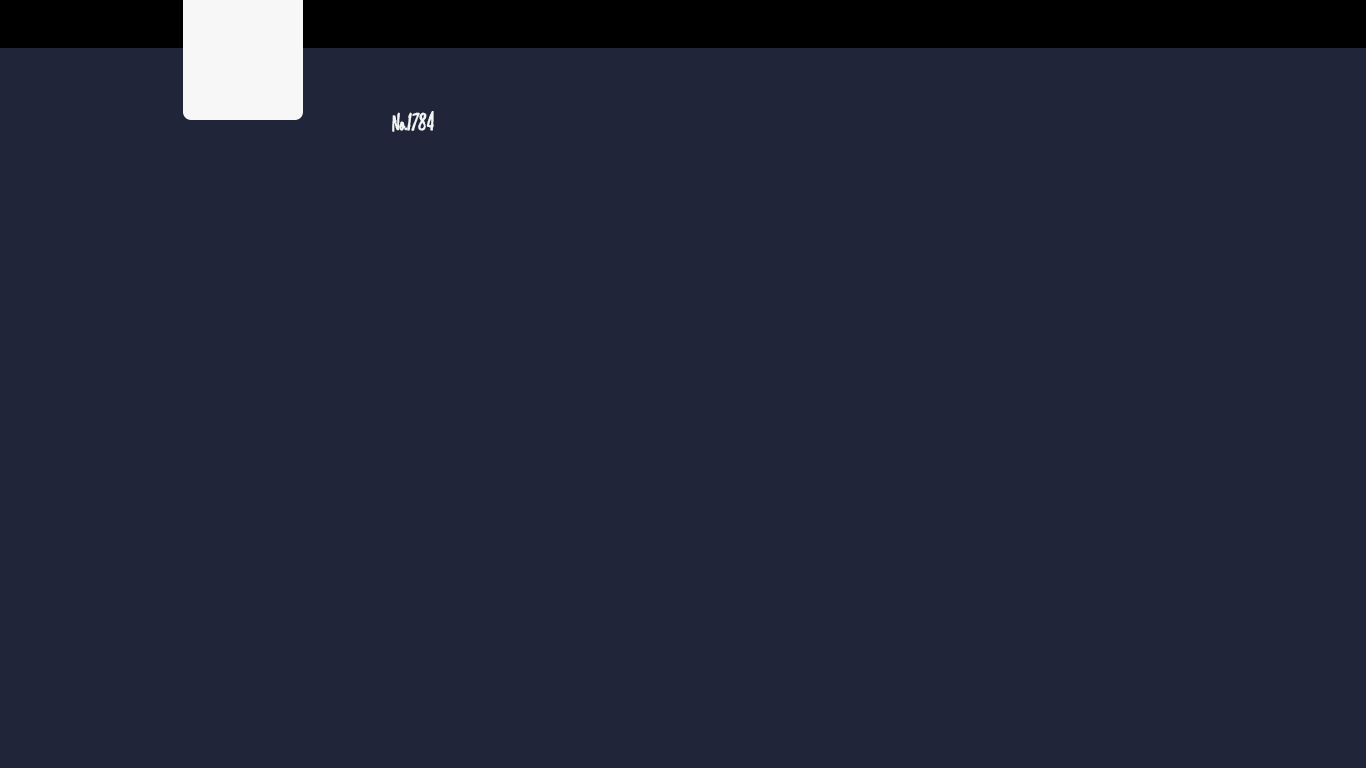
<style>
.page{position:relative;width:1366px;height:768px;background:#202539}
.page>*{position:absolute;margin:0}
.t1{font:24px "Bouffant-Regular";color:#f0f4f4;font-weight:bold}
</style>
<div class="page">
<p class="t1" style="left:392px;top:111px;width:42px;height:21px">No.1784</p>
</div>
